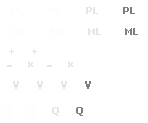
<style>
.page{position:relative;width:148px;height:123px;background:#ffffff}
.page>*{position:absolute;margin:0}
.t1{font:9px "Verdana-Bold";letter-spacing:0.05em;color:#e5e5e5}
.t2{font:9px "Verdana-Bold";letter-spacing:0.05em;color:#7f7f7f}
.t3{font:11px "Verdana-Bold";letter-spacing:0.05em;color:#e5e5e5}
.t4{font:11px "Verdana-Bold";letter-spacing:0.05em;color:#7f7f7f}
.t5{font:10px "Verdana-Bold";letter-spacing:0.05em;color:#e5e5e5}
.t6{font:10px "Verdana-Bold";letter-spacing:0.05em;color:#7f7f7f}
</style>
<div class="page">
<p class="t1" style="left:86px;top:7px;width:12px;height:7px">PL</p>
<p class="t2" style="left:123px;top:7px;width:12px;height:7px">PL</p>
<p class="t1" style="left:9px;top:49px;width:5px;height:5px">+</p>
<p class="t1" style="left:32px;top:49px;width:5px;height:5px">+</p>
<p class="t1" style="left:28px;top:62px;width:5px;height:5px">x</p>
<p class="t1" style="left:68px;top:62px;width:5px;height:5px">x</p>
<p class="t3" style="left:13px;top:81px;width:6px;height:8px">V</p>
<p class="t3" style="left:37px;top:81px;width:6px;height:8px">V</p>
<p class="t3" style="left:61px;top:81px;width:6px;height:8px">V</p>
<p class="t4" style="left:85px;top:81px;width:6px;height:8px">V</p>
<p class="t5" style="left:52px;top:107px;width:7px;height:9px">Q</p>
<p class="t6" style="left:76px;top:107px;width:7px;height:9px">Q</p>
</div>
